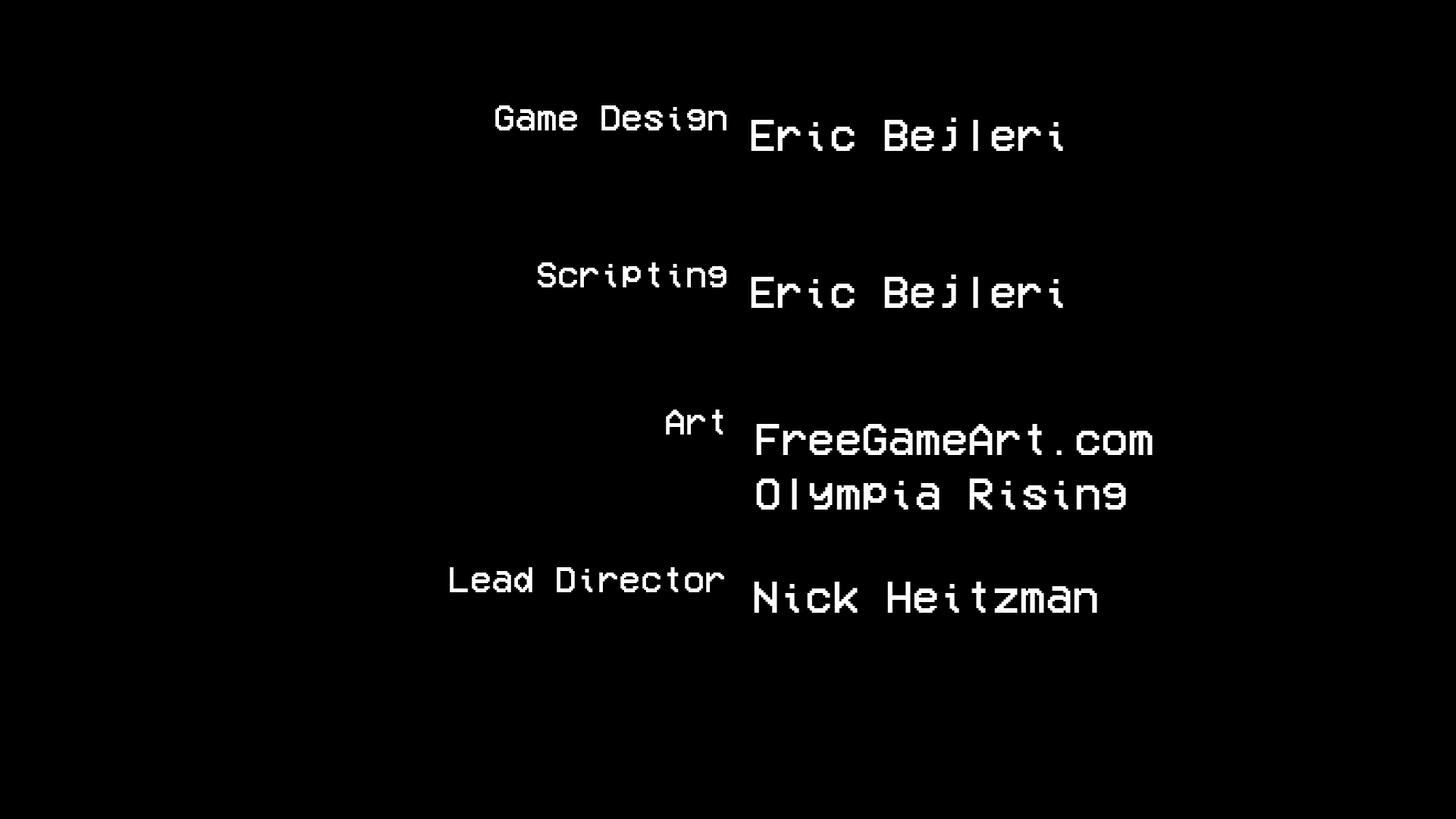
<style>
.page{position:relative;width:1456px;height:819px;background:#000000}
.page>*{position:absolute;margin:0}
.t1{font:36.4px "VCROSDMono";color:#ffffff}
.t2{font:22.7px "VCROSDMono";color:#ffffff}
.t3{font:45.5px "VCROSDMono";color:#ffffff}
</style>
<div class="page">
<p class="t1" style="left:495px;top:105px;width:231px;height:25px"><span class="t2"><br><br></span>Game Design</p>
<p class="t3" style="left:751px;top:118px;width:312px;height:33px"><span class="t2"><br> <br> </span>Eric Bejleri</p>
<p class="t1" style="left:538px;top:262px;width:188px;height:25px"><span class="t2"><br><br></span>Scripting</p>
<p class="t3" style="left:751px;top:275px;width:312px;height:33px"><span class="t2"><br> <br> </span>Eric Bejleri</p>
<p class="t1" style="left:666px;top:409px;width:57px;height:26px"><span class="t2"><br><br></span>Art</p>
<p class="t3" style="left:756px;top:424px;width:397px;height:86px"><span class="t2"><br> <br></span> FreeGameArt.com<br> Olympia Rising</p>
<p class="t1" style="left:450px;top:567px;width:274px;height:25px"><span class="t2"><br><br></span>Lead Director</p>
<p class="t3" style="left:754px;top:582px;width:343px;height:31px"><span class="t2"><br> <br></span> Nick Heitzman</p>
</div>
